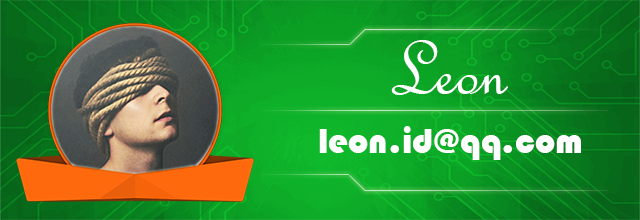
<style>
.page{position:relative;width:640px;height:220px}
.page>*{position:absolute;margin:0}
.t1{font:80px "FrenchScriptMT";color:#ffffff}
.t2{font:36px "Bauhaus93";color:#ffffff}
</style>
<div class="page">
<p class="t1" style="left:391px;top:40px;width:117px;height:55px">Leon</p>
<p class="t2" style="left:319px;top:126px;width:262px;height:34px">leon.id@qq.com</p>
</div>
